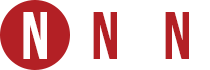
<style>
.page{position:relative;width:210px;height:70px;background:#ffffff}
.page>*{position:absolute;margin:0}
.t1{font:66.7px "BebasNeue";color:#ffffff}
.t2{font:66.7px "BebasNeue";color:#b32025}
</style>
<div class="page">
<p class="t1" style="left:23px;top:12px;width:24px;height:47px">n</p>
<p class="t2" style="left:93px;top:12px;width:24px;height:47px">N</p>
<p class="t2" style="left:165px;top:12px;width:24px;height:47px">N</p>
</div>
